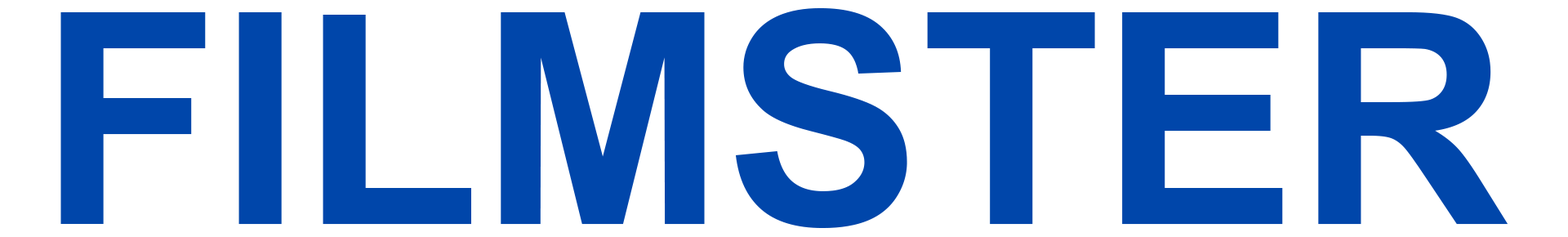
<style>
.page{position:relative;width:1568px;height:237px;background:#ffffff}
.page>*{position:absolute;margin:0}
.t1{font:294.6px "Arial-BoldMT";color:#0046aa}
</style>
<div class="page">
<p class="t1" style="left:60px;top:8px;width:1448px;height:220px">FILMSTER</p>
</div>
